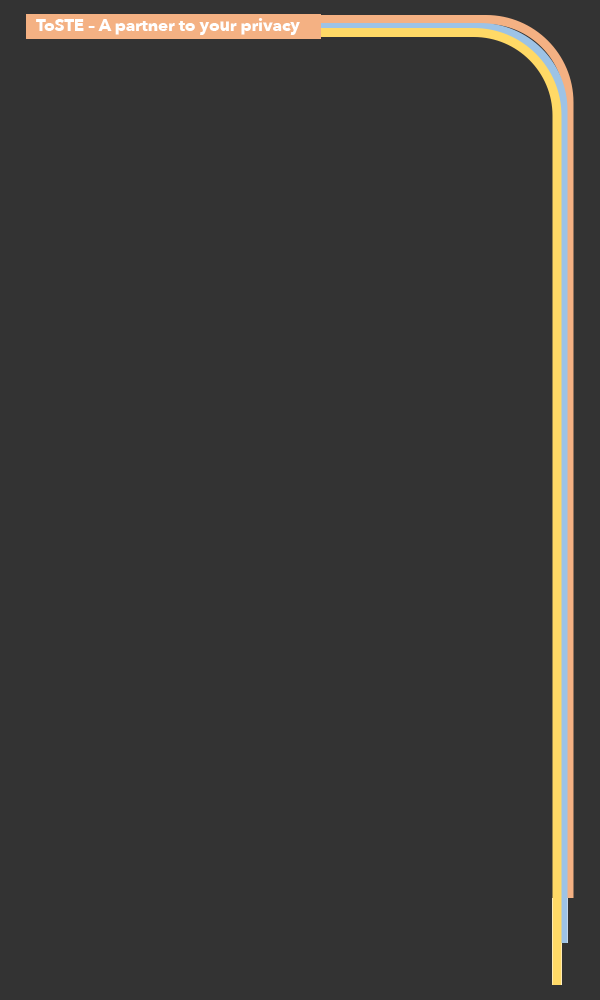
<style>
.page{position:relative;width:600px;height:1000px;background:#333333}
.page>*{position:absolute;margin:0}
.t1{font:16.7px "AvenirNext-Bold";color:#ffffff}
</style>
<div class="page">
<p class="t1" style="left:36px;top:18px;width:264px;height:17px">ToSTE – A partner to your privacy</p>
</div>
